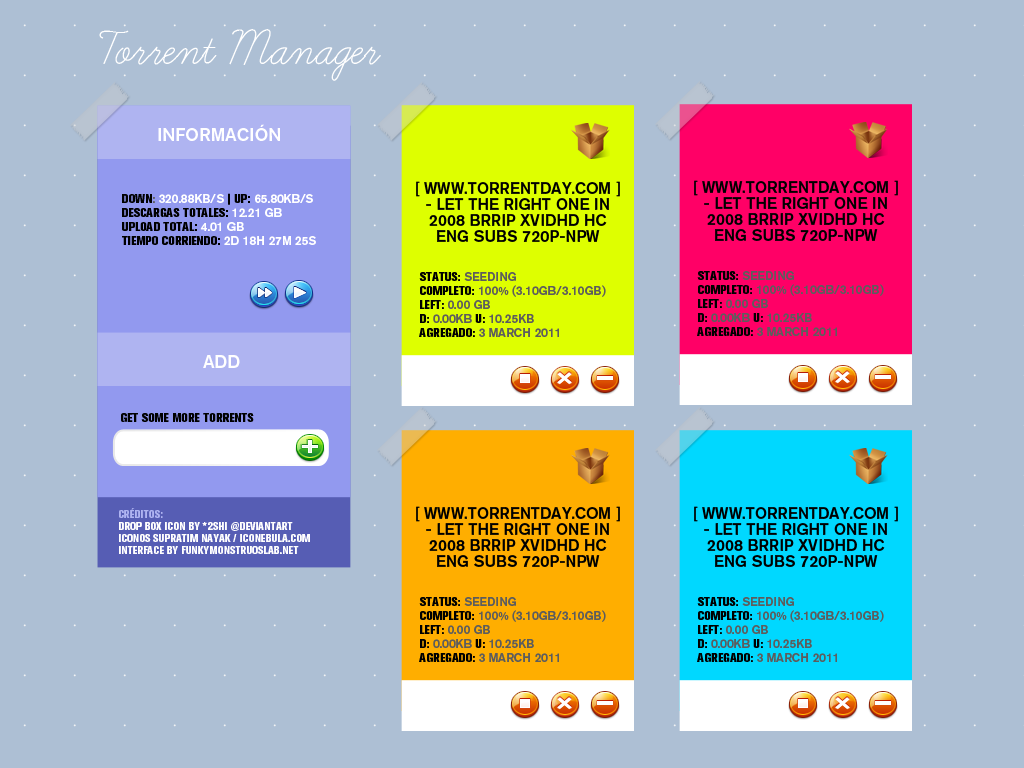
<style>
.page{position:relative;width:1024px;height:768px;background:#adbfd4}
.page>*{position:absolute;margin:0}
.t1{font:18px "NissanAG-Medium";color:#ffffff;text-transform:uppercase}
.t2{font:16px/16px "NissanAG-Medium";color:#000000;text-transform:uppercase}
.t3{font:12px/14px "NissanAG-ExtraBold";color:#000000;text-transform:uppercase}
.t4{font:12px/14px "NissanAG-ExtraBold";color:#010101;text-transform:uppercase}
.t5{font:12px/14px "NissanAG-Medium";color:#5d5d5d;text-transform:uppercase}
.t6{font:12px/14px "NissanAG-Medium";color:#ffffff;text-transform:uppercase}
.t7{font:12px/14px "NissanAG-Medium";color:#000000;text-transform:uppercase}
.t8{font:12px "NissanAG-ExtraBold";color:#010101;text-transform:uppercase}
.t9{font:11px/12px "NissanAG-XBoldCnd";color:#fffefe;text-transform:uppercase}
.t10{font:11px/12px "NissanAG-XBoldCnd";color:#afb4f1;text-transform:uppercase}
</style>
<div class="page">
<p class="t1" style="left:158px;top:124px;width:122px;height:17px">Información</p>
<p class="t2" style="left:416px;top:181px;width:204px;height:61px;text-align:center">[ www.Torrentday.com ] - Let The Right One In 2008 BRRip XvidHD HC ENG SUBs 720p-NPW</p>
<p class="t2" style="left:694px;top:180px;width:204px;height:61px;text-align:center">[ www.Torrentday.com ] - Let The Right One In 2008 BRRip XvidHD HC ENG SUBs 720p-NPW</p>
<p class="t3" style="left:122px;top:193px;width:194px;height:52px;text-align:justify"><span class="t4">Down</span><span class="t5">: </span><span class="t6">320.88KB/s</span> | Up: <span class="t6">65.80KB/s<br></span>Descargas totales: <span class="t6">12.21 GB<br></span>Upload total: <span class="t6">4.01 GB<br></span>Tiempo corriendo: <span class="t6">2d 18h 27m 25s</span></p>
<p class="t5" style="left:419px;top:272px;width:187px;height:65px;text-align:justify"><span class="t3">Status</span><span class="t7">: </span>Seeding<br><span class="t3">Completo</span><span class="t7">: </span>100% (3.10GB/3.10GB)<br><span class="t3">Left</span><span class="t7">: </span>0.00 GB<br><span class="t3">D</span><span class="t7">: </span>0.00KB <span class="t3">U</span><span class="t7">:</span> 10.25KB<br><span class="t3">Agregado</span><span class="t7">: </span>3 March 2011</p>
<p class="t5" style="left:697px;top:271px;width:187px;height:65px;text-align:justify"><span class="t3">Status</span><span class="t7">: </span>Seeding<br><span class="t3">Completo</span><span class="t7">: </span>100% (3.10GB/3.10GB)<br><span class="t3">Left</span><span class="t7">: </span>0.00 GB<br><span class="t3">D</span><span class="t7">: </span>0.00KB <span class="t3">U</span><span class="t7">:</span> 10.25KB<br><span class="t3">Agregado</span><span class="t7">: </span>3 March 2011</p>
<p class="t1" style="left:203px;top:355px;width:37px;height:13px">ADD</p>
<p class="t8" style="left:121px;top:413px;width:133px;height:9px">Get some more torrents</p>
<p class="t9" style="left:119px;top:508px;width:191px;height:46px;text-align:justify"><span class="t10">Créditos:<br></span>Drop Box Icon by *2Shi @deviantart<br>Iconos Supratim Nayak / iconebula.com<br>interface by funkymonstruoslab.net</p>
<p class="t2" style="left:416px;top:506px;width:204px;height:61px;text-align:center">[ www.Torrentday.com ] - Let The Right One In 2008 BRRip XvidHD HC ENG SUBs 720p-NPW</p>
<p class="t2" style="left:694px;top:506px;width:204px;height:61px;text-align:center">[ www.Torrentday.com ] - Let The Right One In 2008 BRRip XvidHD HC ENG SUBs 720p-NPW</p>
<p class="t5" style="left:419px;top:597px;width:187px;height:65px;text-align:justify"><span class="t3">Status</span><span class="t7">: </span>Seeding<br><span class="t3">Completo</span><span class="t7">: </span>100% (3.10GB/3.10GB)<br><span class="t3">Left</span><span class="t7">: </span>0.00 GB<br><span class="t3">D</span><span class="t7">: </span>0.00KB <span class="t3">U</span><span class="t7">:</span> 10.25KB<br><span class="t3">Agregado</span><span class="t7">: </span>3 March 2011</p>
<p class="t5" style="left:697px;top:597px;width:187px;height:65px;text-align:justify"><span class="t3">Status</span><span class="t7">: </span>Seeding<br><span class="t3">Completo</span><span class="t7">: </span>100% (3.10GB/3.10GB)<br><span class="t3">Left</span><span class="t7">: </span>0.00 GB<br><span class="t3">D</span><span class="t7">: </span>0.00KB <span class="t3">U</span><span class="t7">:</span> 10.25KB<br><span class="t3">Agregado</span><span class="t7">: </span>3 March 2011</p>
</div>
